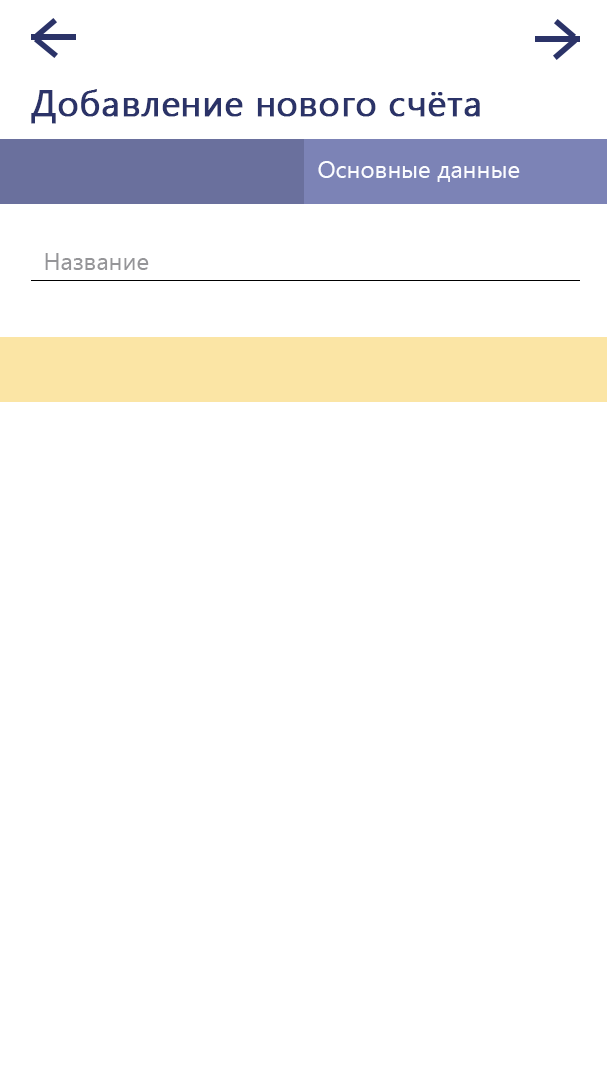
<style>
.page{position:relative;width:607px;height:1080px;background:#ffffff}
.page>*{position:absolute;margin:0}
.t1{font:36px "YuGothicUI-Regular";color:#2b3368;font-weight:bold}
.t2{font:24px "YuGothicUI-Regular";color:#fbfcff}
.t3{font:24px "YuGothicUI-Regular";color:#959598}
</style>
<div class="page">
<p class="t1" style="left:31px;top:89px;width:449px;height:35px">Добавление нового счёта</p>
<p class="t2" style="left:318px;top:161px;width:202px;height:21px">Основные данные</p>
<p class="t3" style="left:45px;top:253px;width:104px;height:17px">Название</p>
</div>
